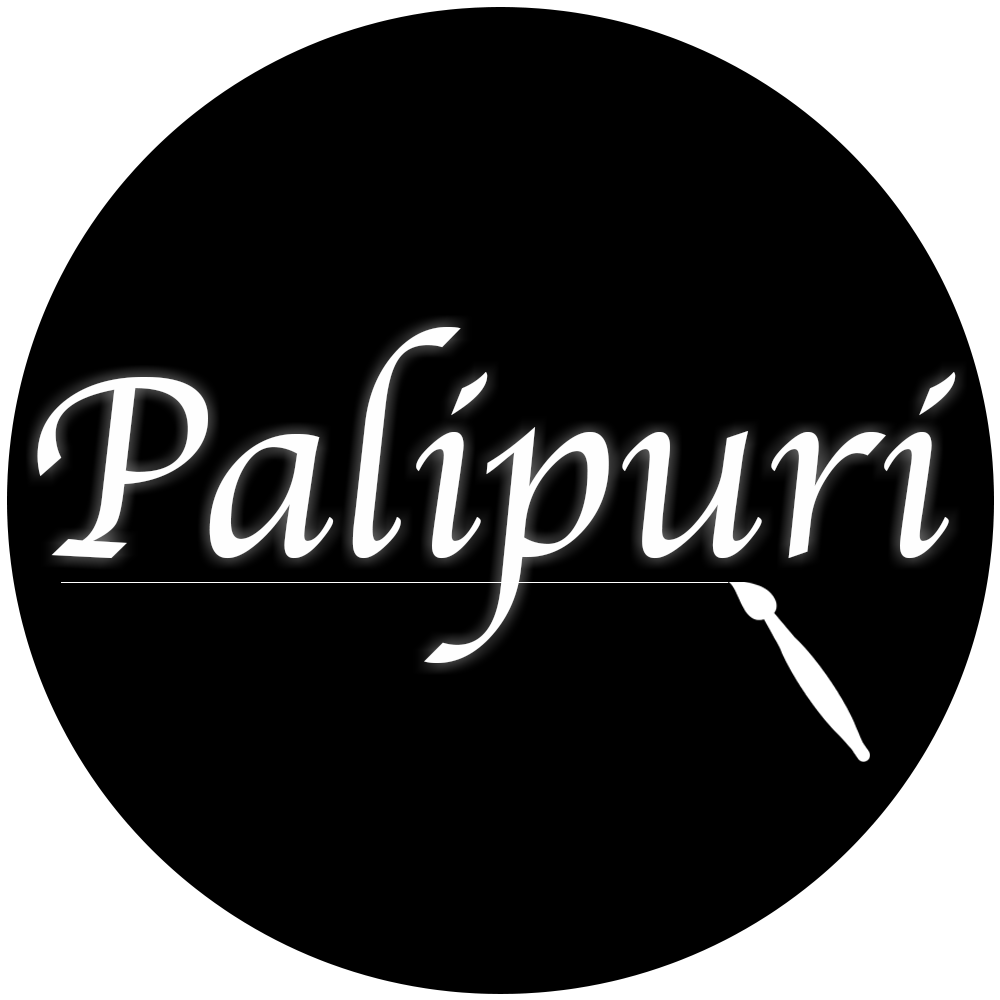
<style>
.page{position:relative;width:1000px;height:1000px;background:#000000}
.page>*{position:absolute;margin:0}
.t1{font:264px "Apple-Chancery";color:#fefefe}
</style>
<div class="page">
<p class="t1" style="left:37px;top:327px;width:919px;height:336px">Palipuri</p>
</div>
